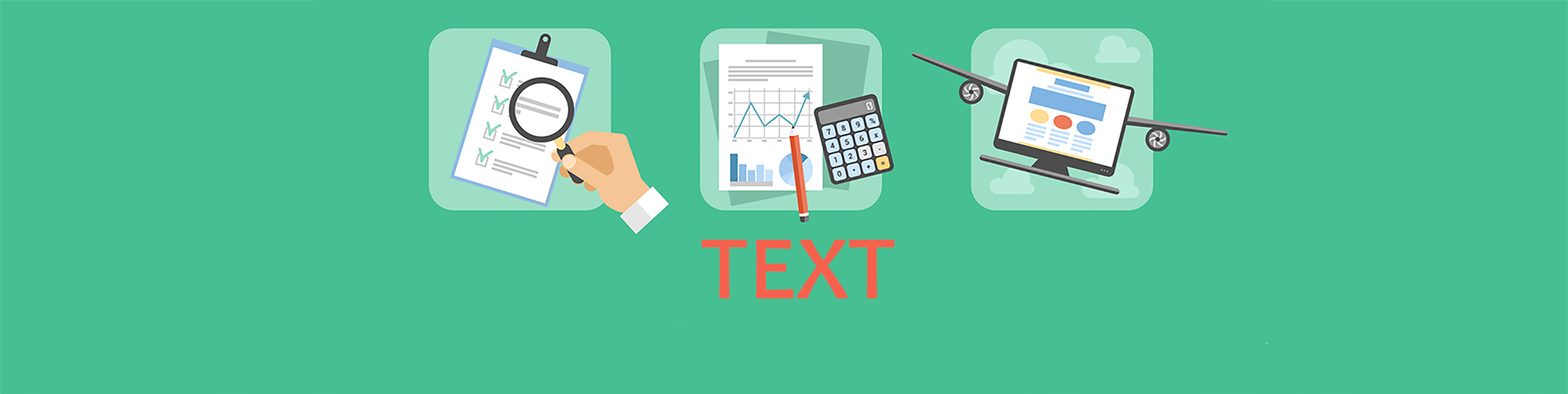
<style>
.page{position:relative;width:1568px;height:394px;background:#46bf92}
.page>*{position:absolute;margin:0}
.t1{font:88.4px "Candara";color:#f6614d;font-weight:bold}
</style>
<div class="page">
<p class="t1" style="left:701px;top:239px;width:194px;height:60px">TEXT</p>
</div>
